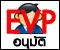
<style>
.page{position:relative;width:60px;height:50px;background:#ffffff}
.page>*{position:absolute;margin:0}
.t1{font:43px "PSLxKittithada-Bold";color:#f30808;font-weight:bold}
.t2{font:18px "PSLxKittithada-Bold";color:#040007;font-weight:bold}
</style>
<div class="page">
<p class="t1" style="left:6px;top:9px;width:50px;height:26px">EVP</p>
<p class="t2" style="left:13px;top:36px;width:33px;height:14px">อนุมัติ</p>
</div>
